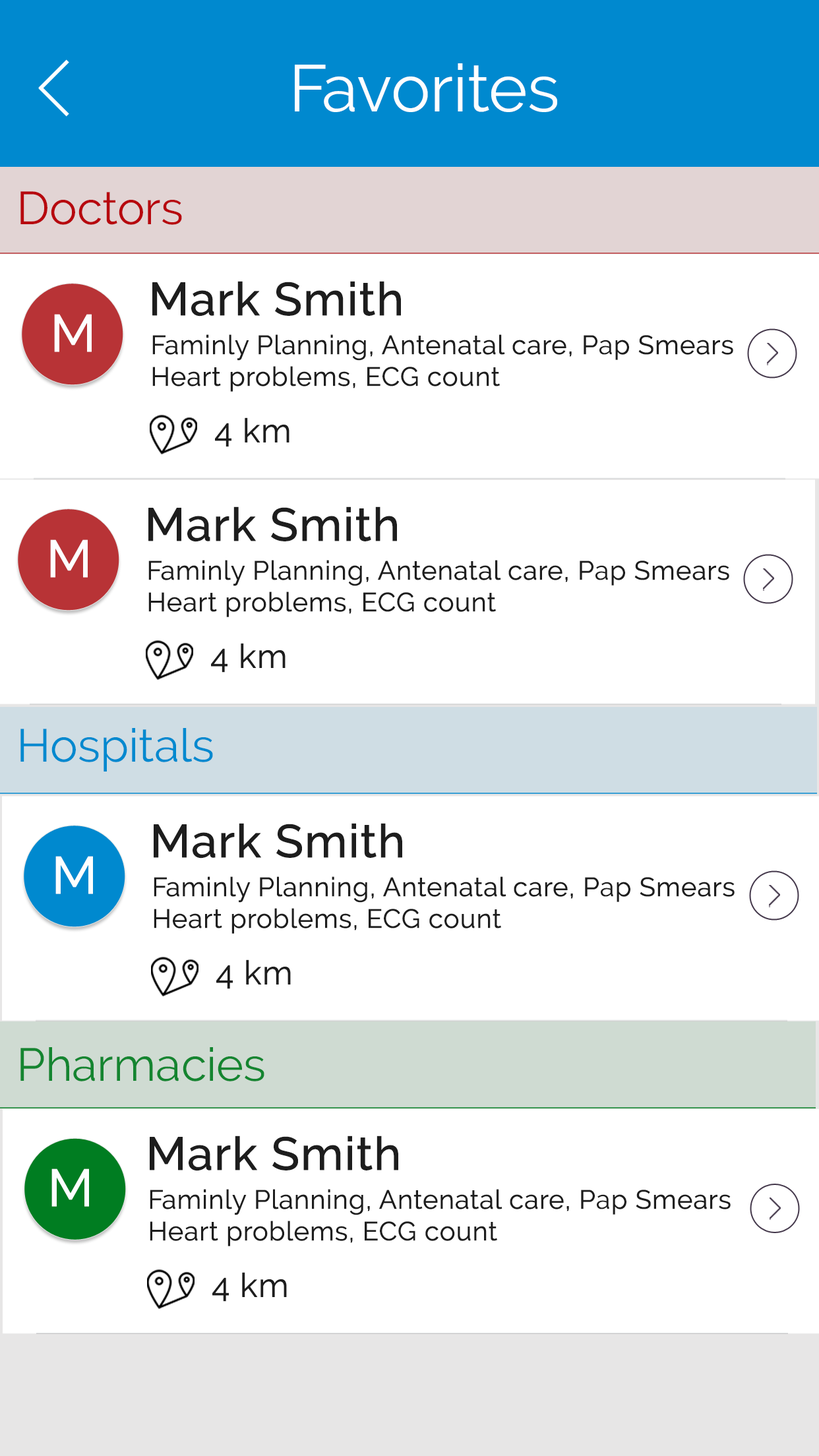
<style>
.page{position:relative;width:819px;height:1456px;background:#ffffff}
.page>*{position:absolute;margin:0}
.t1{font:65.9px "Raleway-Regular";color:#fdfeff}
.t2{font:46.2px "Raleway-Regular";color:#b70309}
.t3{font:46.2px "Raleway-Medium";color:#1d1d1d;font-weight:bold}
.t4{font:52.8px "Raleway-Medium";letter-spacing:0.15em;color:#fdfefe;text-transform:uppercase}
.t5{font:26.4px "Raleway-Regular";color:#1d1d1d;font-weight:bold}
.t6{font:33px "Raleway-Regular";color:#1d1d1d;font-weight:bold}
.t7{font:46.2px "Raleway-Regular";color:#0089cf}
.t8{font:46.2px "Raleway-Regular";color:#168632}
</style>
<div class="page">
<p class="t1" style="left:295px;top:63px;width:262px;height:49px">Favorites</p>
<p class="t2" style="left:20px;top:191px;width:162px;height:34px">Doctors</p>
<p class="t3" style="left:152px;top:281px;width:249px;height:36px">Mark Smith</p>
<p class="t4" style="left:54px;top:314px;width:38px;height:38px">M</p>
<p class="t5" style="left:152px;top:334px;width:581px;height:58px">Faminly Planning, Antenatal care, Pap Smears<br>Heart problems, ECG count</p>
<p class="t6" style="left:215px;top:417px;width:74px;height:30px">4 km</p>
<p class="t3" style="left:148px;top:506px;width:249px;height:36px">Mark Smith</p>
<p class="t4" style="left:50px;top:539px;width:38px;height:39px">M</p>
<p class="t5" style="left:148px;top:560px;width:581px;height:57px">Faminly Planning, Antenatal care, Pap Smears<br>Heart problems, ECG count</p>
<p class="t6" style="left:211px;top:643px;width:75px;height:30px">4 km</p>
<p class="t7" style="left:20px;top:728px;width:193px;height:44px">Hospitals</p>
<p class="t3" style="left:154px;top:823px;width:248px;height:36px">Mark Smith</p>
<p class="t4" style="left:55px;top:856px;width:38px;height:38px">M</p>
<p class="t5" style="left:154px;top:876px;width:581px;height:58px">Faminly Planning, Antenatal care, Pap Smears<br>Heart problems, ECG count</p>
<p class="t6" style="left:216px;top:959px;width:75px;height:30px">4 km</p>
<p class="t8" style="left:20px;top:1047px;width:244px;height:34px">Pharmacies</p>
<p class="t3" style="left:150px;top:1136px;width:248px;height:35px">Mark Smith</p>
<p class="t4" style="left:51px;top:1168px;width:38px;height:39px">M</p>
<p class="t5" style="left:150px;top:1189px;width:581px;height:57px">Faminly Planning, Antenatal care, Pap Smears<br>Heart problems, ECG count</p>
<p class="t6" style="left:212px;top:1272px;width:75px;height:30px">4 km</p>
</div>
